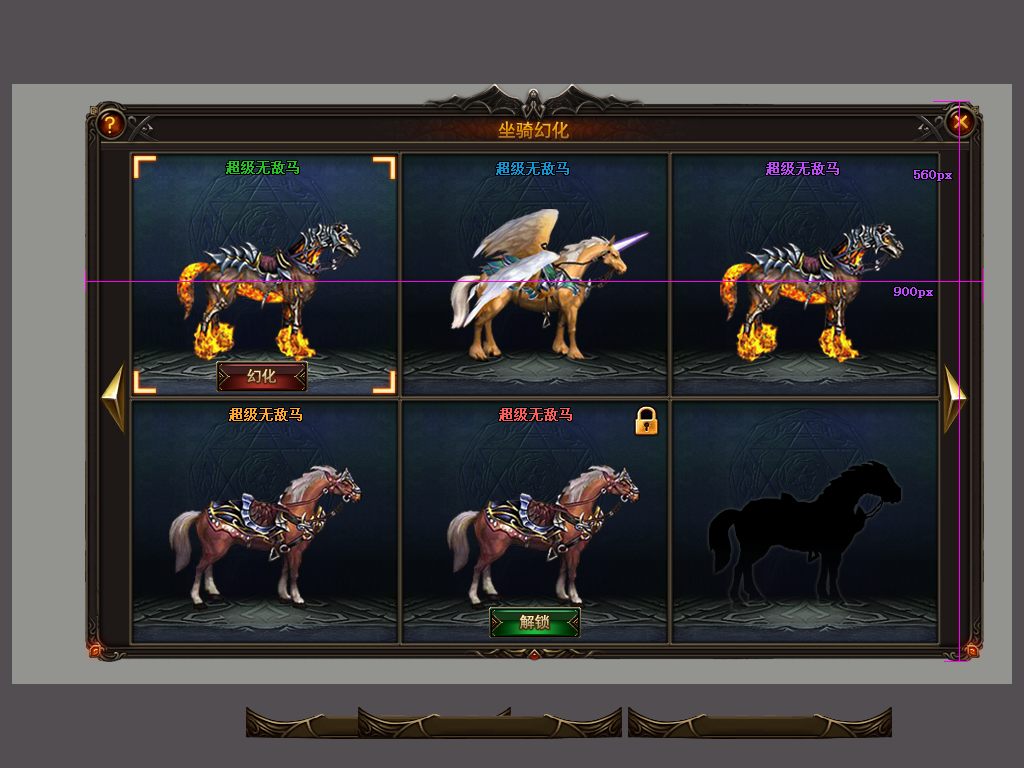
<style>
.page{position:relative;width:1024px;height:768px;background:#524e52}
.page>*{position:absolute;margin:0}
.t1{font:18px "-G-h-e-i-0-1-m"}
.t2{font:14px "SimSun";color:#23c423;font-weight:bold}
.t3{font:14px "SimSun";color:#1096d5;font-weight:bold}
.t4{font:14px "SimSun";color:#be4bf9;font-weight:bold}
.t5{font:15px "-G-h-e-i-0-1-m"}
.t6{font:14px "SimSun";color:#ffa72e;font-weight:bold}
.t7{font:14px "SimSun";color:#ff5c5c;font-weight:bold}
</style>
<div class="page">
<p class="t1" style="left:498px;top:121px;width:71px;height:18px">坐骑幻化</p>
<p class="t2" style="left:226px;top:161px;width:73px;height:13px">超级无敌马</p>
<p class="t3" style="left:496px;top:162px;width:73px;height:13px">超级无敌马</p>
<p class="t4" style="left:766px;top:162px;width:73px;height:13px">超级无敌马</p>
<p class="t4" style="left:914px;top:170px;width:38px;height:11px">560px</p>
<p class="t4" style="left:894px;top:287px;width:39px;height:11px">900px</p>
<p class="t5" style="left:247px;top:369px;width:29px;height:14px">幻化</p>
<p class="t6" style="left:229px;top:408px;width:73px;height:13px">超级无敌马</p>
<p class="t7" style="left:499px;top:408px;width:73px;height:13px">超级无敌马</p>
<p class="t5" style="left:519px;top:614px;width:31px;height:16px">解锁</p>
</div>
